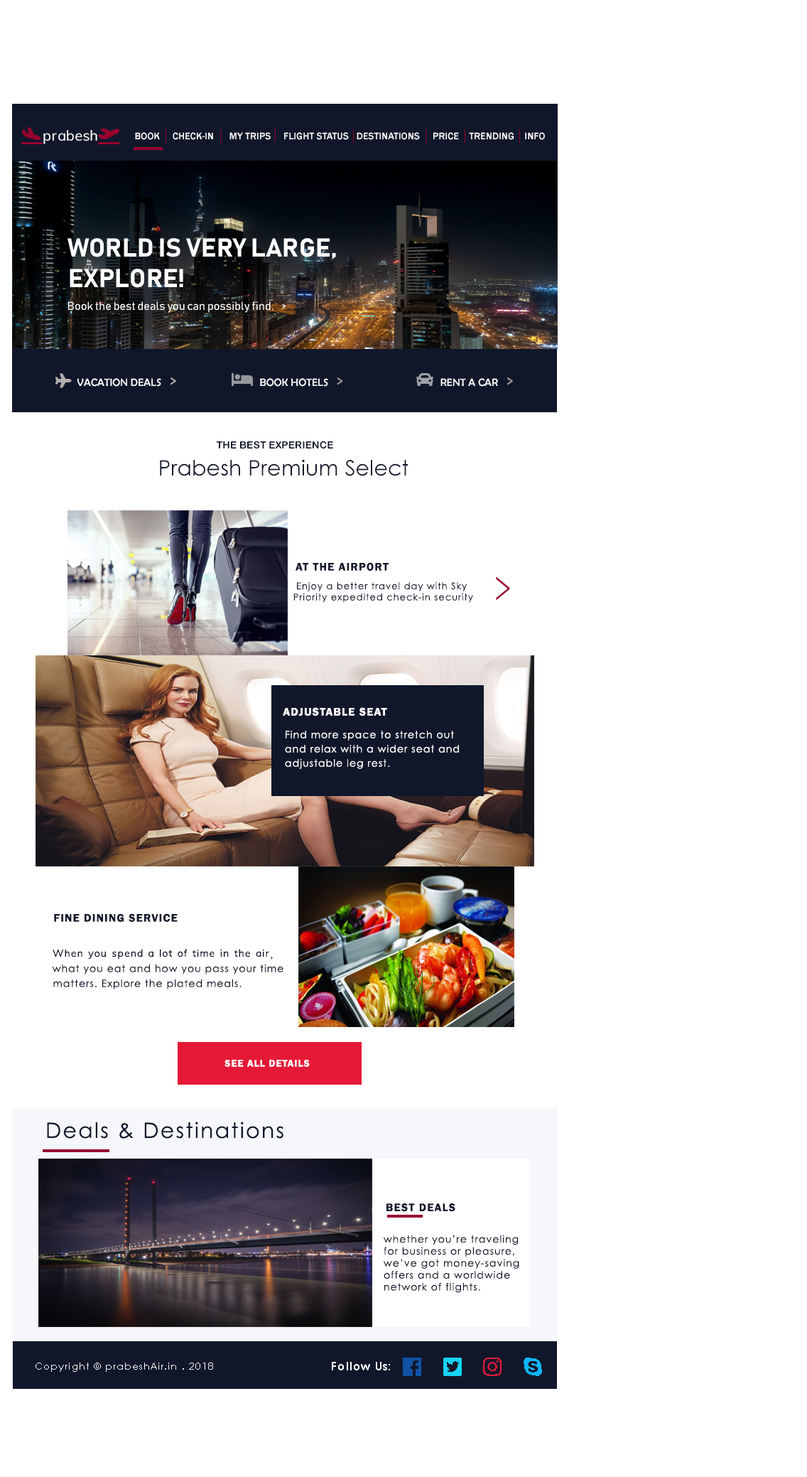
<style>
.page{position:relative;width:807px;height:1477px;background:#ffffff}
.page>*{position:absolute;margin:0}
.t1{font:10px "FranklinGothic-Medium";letter-spacing:0.005em;color:#ffffff}
.t2{font:25.6px "Bahnschrift-Bold";letter-spacing:0.005em;color:#ffffff}
.t3{font:11.4px "Bahnschrift-SemiLight";letter-spacing:0.005em;color:#ffffff}
.t4{font:10px "ArialRoundedMTBold";letter-spacing:0.005em;color:#11172b}
.t5{font:21.3px "CenturyGothic";letter-spacing:0.005em;color:#11172b}
.t6{font:11.4px "FranklinGothic-Demi";letter-spacing:0.075em;color:#11172b}
.t7{font:48.1px "TimesNewRomanPSMT";letter-spacing:0.075em;color:#98012e;scale:0.53 1}
.t8{font:9.2px "CenturyGothic";letter-spacing:0.075em;color:#11172b}
.t9{font:11.4px "FranklinGothic-Demi";letter-spacing:0.075em;color:#ffffff}
.t10{font:10px "CenturyGothic";letter-spacing:0.075em;color:#ffffff}
.t11{font:10px "CenturyGothic";letter-spacing:0.075em;color:#11172b}
.t12{font:21.3px "CenturyGothic";letter-spacing:0.075em;color:#11172b}
.t13{font:11.4px "CenturyGothic-Bold";letter-spacing:0.075em;color:#ffffff}
</style>
<div class="page">
<p class="t1" style="left:135px;top:132px;width:410px;height:8px">BOOK     CHECK-IN      MY TRIPS     FLIGHT STATUS   DESTINATIONS     PRICE    TRENDING    INFO</p>
<p class="t2" style="left:68px;top:238px;width:268px;height:50px;text-align:center">WORLD IS VERY LARGE,<br>EXPLORE!</p>
<p class="t3" style="left:68px;top:301px;width:218px;height:12px">Book the best deals you can possibly find.    &gt;</p>
<p class="t4" style="left:216px;top:441px;width:117px;height:7px">THE BEST EXPERIENCE</p>
<p class="t5" style="left:160px;top:459px;width:249px;height:17px">Prabesh Premium Select</p>
<p class="t6" style="left:296px;top:562px;width:93px;height:9px">AT THE AIRPORT</p>
<p class="t7" style="left:496px;top:576px;width:14px;height:25px">&gt;</p>
<p class="t8" style="left:294px;top:582px;width:179px;height:21px;text-align:center">Enjoy a better travel day with Sky<br> Priority expedited check-in security</p>
<p class="t9" style="left:283px;top:707px;width:104px;height:9px">ADJUSTABLE SEAT</p>
<p class="t10" style="left:286px;top:731px;width:168px;height:10px">Find more space to stretch out</p>
<p class="t10" style="left:285px;top:745px;width:174px;height:8px">and relax with a wider seat and</p>
<p class="t10" style="left:285px;top:759px;width:105px;height:10px">adjustable leg rest.</p>
<p class="t6" style="left:54px;top:913px;width:124px;height:9px">FINE DINING SERVICE</p>
<p class="t11" style="left:52px;top:964px;width:232px;height:10px">what you eat and how you pass your time</p>
<p class="t11" style="left:53px;top:979px;width:189px;height:10px">matters. Explore the plated meals.</p>
<p class="t12" style="left:47px;top:1122px;width:237px;height:17px">Deals &amp; Destinations</p>
<p class="t6" style="left:387px;top:1203px;width:69px;height:9px">BEST DEALS</p>
<p class="t11" style="left:384px;top:1235px;width:136px;height:58px">whether you’re traveling for business or pleasure, we’ve got money-saving offers and a worldwide network of flights.</p>
<p class="t13" style="left:332px;top:1362px;width:58px;height:8px">Follow Us:</p>
<p class="t10" style="left:36px;top:1362px;width:177px;height:10px">Copyright © prabeshAir.in . 2018</p>
</div>
